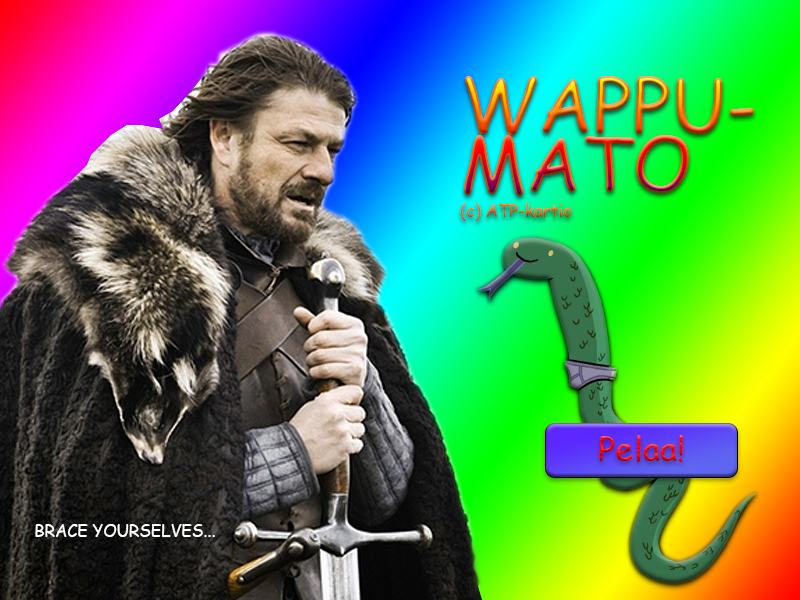
<style>
.page{position:relative;width:800px;height:600px}
.page>*{position:absolute;margin:0}
.t1{font:16.7px/25px "ComicSansMS"}
.t2{font:75px/58.3px "ComicSansMS"}
.t3{font:33.3px "ComicSansMS"}
.t4{font:16.7px "ComicSansMS";color:#ffffff}
</style>
<div class="page">
<p class="t1" style="left:460px;top:76px;width:294px;height:145px"><span class="t2">WAPPUMATO<br></span>(c) ATP-kartio</p>
<p class="t3" style="left:599px;top:435px;width:84px;height:27px">Pelaa!</p>
<p class="t4" style="left:35px;top:524px;width:180px;height:13px">BRACE YOURSELVES...</p>
</div>
